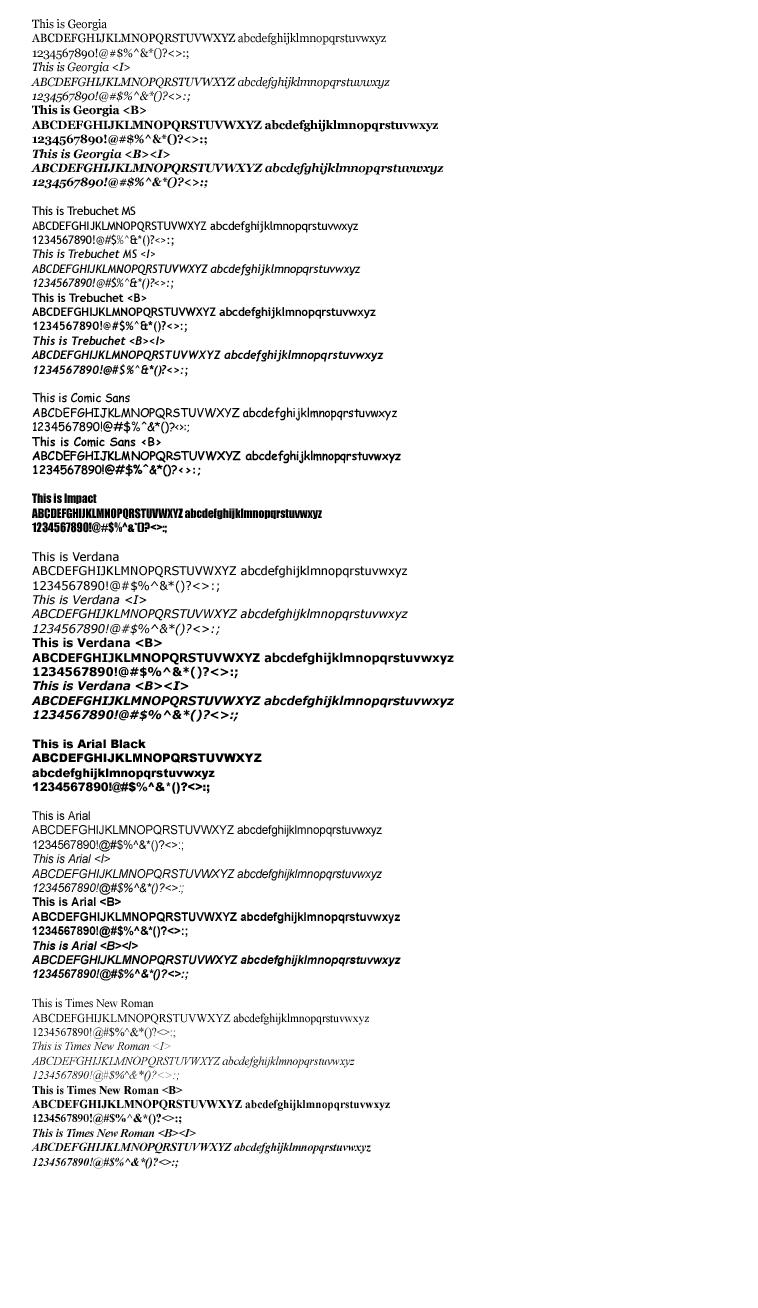
<style>
.page{position:relative;width:758px;height:1308px;background:#ffffff}
.page>*{position:absolute;margin:0}
.t1{font:12px "TimesNewRomanPS-BoldItalicMT";letter-spacing:-0.01em;color:#000000;scale:0.97 1}
.t2{font:12px "Georgia";letter-spacing:-0.01em;color:#000000;scale:0.97 1}
.t3{font:12px "Georgia-Italic";letter-spacing:-0.01em;color:#000000;scale:0.97 1}
.t4{font:12px "Georgia-Bold";letter-spacing:-0.01em;color:#000000;scale:0.97 1}
.t5{font:12px "Georgia-BoldItalic";letter-spacing:-0.01em;color:#000000;scale:0.97 1}
.t6{font:12px "TrebuchetMS";letter-spacing:-0.01em;color:#000000;scale:0.97 1}
.t7{font:12px "TrebuchetMS-Italic";letter-spacing:-0.01em;color:#000000;scale:0.97 1}
.t8{font:12px "TrebuchetMS-Bold";letter-spacing:-0.01em;color:#000000;scale:0.97 1}
.t9{font:12px "Trebuchet-BoldItalic";letter-spacing:-0.01em;color:#000000;scale:0.97 1}
.t10{font:12px "ComicSansMS";letter-spacing:-0.01em;color:#000000;scale:0.97 1}
.t11{font:12px "ComicSansMS-Bold";letter-spacing:-0.01em;color:#000000;scale:0.97 1}
.t12{font:12px "Impact";letter-spacing:-0.01em;color:#000000;scale:0.97 1}
.t13{font:12px "Verdana";letter-spacing:-0.01em;color:#000000;scale:0.97 1}
.t14{font:12px "Verdana-Italic";letter-spacing:-0.01em;color:#000000;scale:0.97 1}
.t15{font:12px "Verdana-Bold";letter-spacing:-0.01em;color:#000000;scale:0.97 1}
.t16{font:12px "Verdana-BoldItalic";letter-spacing:-0.01em;color:#000000;scale:0.97 1}
.t17{font:12px "Arial-Black";letter-spacing:-0.01em;color:#000000;scale:0.97 1}
.t18{font:12px "ArialMT";letter-spacing:-0.01em;color:#000000;scale:0.97 1}
.t19{font:12px "Arial-ItalicMT";letter-spacing:-0.01em;color:#000000;scale:0.97 1}
.t20{font:12px "Arial-BoldMT";letter-spacing:-0.01em;color:#000000;scale:0.97 1}
.t21{font:12px "Arial-BoldItalicMT";letter-spacing:-0.01em;color:#000000;scale:0.97 1}
.t22{font:12px "TimesNewRomanPSMT";letter-spacing:-0.01em;color:#000000;scale:0.97 1}
.t23{font:12px "TimesNewRomanPS-ItalicMT";letter-spacing:-0.01em;color:#000000;scale:0.97 1}
.t24{font:12px "TimesNewRomanPS-BoldMT";letter-spacing:-0.01em;color:#000000;scale:0.97 1}
</style>
<div class="page">
<p class="t1" style="left:31px;top:19px;width:424px;height:1150px"><span class="t2">This is Georgia<br>ABCDEFGHIJKLMNOPQRSTUVWXYZ abcdefghijklmnopqrstuvwxyz<br>1234567890!@#$%^&amp;*()?&lt;&gt;:;<br></span><span class="t3">This is Georgia &lt;I&gt;<br>ABCDEFGHIJKLMNOPQRSTUVWXYZ abcdefghijklmnopqrstuvwxyz<br>1234567890!@#$%^&amp;*()?&lt;&gt;:;<br></span><span class="t4">This is Georgia &lt;B&gt;<br>ABCDEFGHIJKLMNOPQRSTUVWXYZ abcdefghijklmnopqrstuvwxyz<br>1234567890!@#$%^&amp;*()?&lt;&gt;:;<br></span><span class="t5">This is Georgia &lt;B&gt;&lt;I&gt;<br>ABCDEFGHIJKLMNOPQRSTUVWXYZ abcdefghijklmnopqrstuvwxyz<br>1234567890!@#$%^&amp;*()?&lt;&gt;:;<br><br></span><span class="t6">This is Trebuchet MS<br>ABCDEFGHIJKLMNOPQRSTUVWXYZ abcdefghijklmnopqrstuvwxyz<br>1234567890!@#$%^&amp;*()?&lt;&gt;:;<br></span><span class="t7">This is Trebuchet MS &lt;I&gt;<br>ABCDEFGHIJKLMNOPQRSTUVWXYZ abcdefghijklmnopqrstuvwxyz<br>1234567890!@#$%^&amp;*()?&lt;&gt;:;<br></span><span class="t8">This is Trebuchet &lt;B&gt;<br>ABCDEFGHIJKLMNOPQRSTUVWXYZ abcdefghijklmnopqrstuvwxyz<br>1234567890!@#$%^&amp;*()?&lt;&gt;:;<br></span><span class="t9">This is Trebuchet &lt;B&gt;&lt;I&gt;<br>ABCDEFGHIJKLMNOPQRSTUVWXYZ abcdefghijklmnopqrstuvwxyz<br>1234567890!@#$%^&amp;*()?&lt;&gt;:;<br><br></span><span class="t10">This is Comic Sans<br>ABCDEFGHIJKLMNOPQRSTUVWXYZ abcdefghijklmnopqrstuvwxyz<br>1234567890!@#$%^&amp;*()?&lt;&gt;:;<br></span><span class="t11">This is Comic Sans &lt;B&gt; <br>ABCDEFGHIJKLMNOPQRSTUVWXYZ abcdefghijklmnopqrstuvwxyz <br>1234567890!@#$%^&amp;*()?&lt;&gt;:; <br><br></span><span class="t12">This is Impact <br>ABCDEFGHIJKLMNOPQRSTUVWXYZ abcdefghijklmnopqrstuvwxyz <br>1234567890!@#$%^&amp;*()?&lt;&gt;:; <br><br></span><span class="t13">This is Verdana<br>ABCDEFGHIJKLMNOPQRSTUVWXYZ abcdefghijklmnopqrstuvwxyz<br>1234567890!@#$%^&amp;*()?&lt;&gt;:;<br></span><span class="t14">This is Verdana &lt;I&gt;<br>ABCDEFGHIJKLMNOPQRSTUVWXYZ abcdefghijklmnopqrstuvwxyz<br>1234567890!@#$%^&amp;*()?&lt;&gt;:;<br></span><span class="t15">This is Verdana &lt;B&gt;<br>ABCDEFGHIJKLMNOPQRSTUVWXYZ abcdefghijklmnopqrstuvwxyz<br>1234567890!@#$%^&amp;*()?&lt;&gt;:;<br></span><span class="t16">This is Verdana &lt;B&gt;&lt;I&gt;<br>ABCDEFGHIJKLMNOPQRSTUVWXYZ abcdefghijklmnopqrstuvwxyz<br>1234567890!@#$%^&amp;*()?&lt;&gt;:;<br><br></span><span class="t17">This is Arial Black<br>ABCDEFGHIJKLMNOPQRSTUVWXYZ<br>abcdefghijklmnopqrstuvwxyz<br>1234567890!@#$%^&amp;*()?&lt;&gt;:;<br></span><span class="t18"><br>This is Arial<br>ABCDEFGHIJKLMNOPQRSTUVWXYZ abcdefghijklmnopqrstuvwxyz<br>1234567890!@#$%^&amp;*()?&lt;&gt;:;<br></span><span class="t19">This is Arial &lt;I&gt;<br>ABCDEFGHIJKLMNOPQRSTUVWXYZ abcdefghijklmnopqrstuvwxyz<br>1234567890!@#$%^&amp;*()?&lt;&gt;:;<br></span><span class="t20">This is Arial &lt;B&gt;<br>ABCDEFGHIJKLMNOPQRSTUVWXYZ abcdefghijklmnopqrstuvwxyz<br>1234567890!@#$%^&amp;*()?&lt;&gt;:;<br></span><span class="t21">This is Arial &lt;B&gt;&lt;I&gt;<br>ABCDEFGHIJKLMNOPQRSTUVWXYZ abcdefghijklmnopqrstuvwxyz<br>1234567890!@#$%^&amp;*()?&lt;&gt;:;<br><br></span><span class="t22">This is Times New Roman<br>ABCDEFGHIJKLMNOPQRSTUVWXYZ abcdefghijklmnopqrstuvwxyz<br>1234567890!@#$%^&amp;*()?&lt;&gt;:;<br></span><span class="t23">This is Times New Roman &lt;I&gt;<br>ABCDEFGHIJKLMNOPQRSTUVWXYZ abcdefghijklmnopqrstuvwxyz<br>1234567890!@#$%^&amp;*()?&lt;&gt;:;<br></span><span class="t24">This is Times New Roman &lt;B&gt;<br>ABCDEFGHIJKLMNOPQRSTUVWXYZ abcdefghijklmnopqrstuvwxyz<br>1234567890!@#$%^&amp;*()?&lt;&gt;:;<br></span>This is Times New Roman &lt;B&gt;&lt;I&gt;<br>ABCDEFGHIJKLMNOPQRSTUVWXYZ abcdefghijklmnopqrstuvwxyz<br>1234567890!@#$%^&amp;*()?&lt;&gt;:;</p>
</div>
